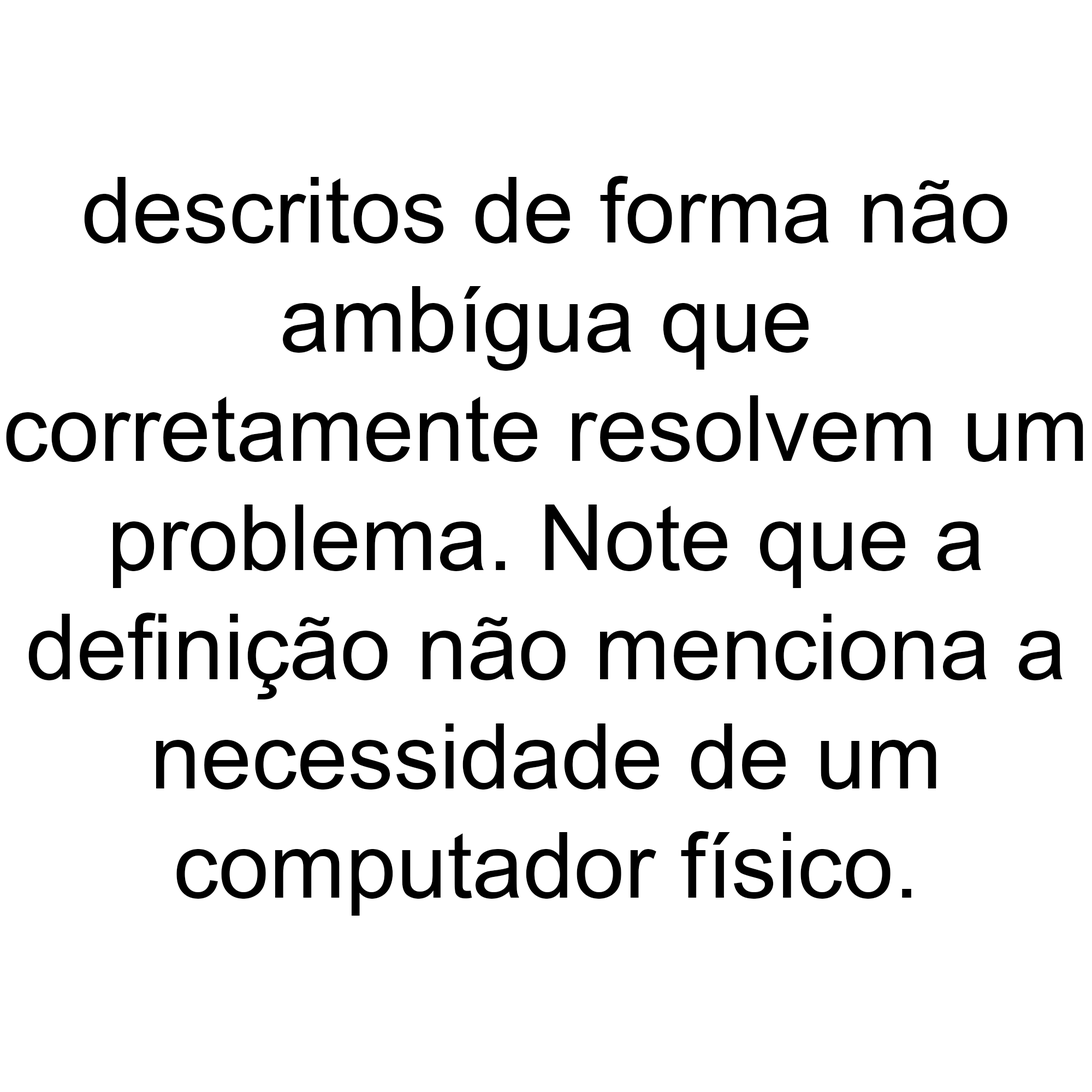
<style>
.page{position:relative;width:1092px;height:1092px;background:#ffffff}
.page>*{position:absolute;margin:0}
.t1{font:91px "ArialMT";color:#000000}
</style>
<div class="page">
<p class="t1" style="left:6px;top:176px;width:1077px;height:740px;text-align:center">descritos de forma não<br>ambígua que<br>corretamente resolvem um<br>problema. Note que a<br>definição não menciona a<br>necessidade de um<br>computador físico.</p>
</div>
